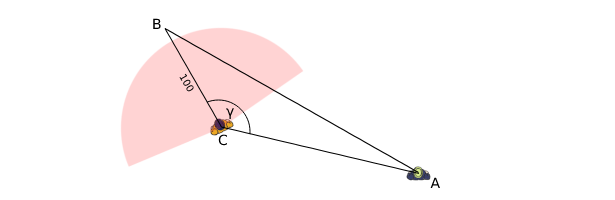
<style>
.page{position:relative;width:615px;height:200px;background:#ffffff}
.page>*{position:absolute;margin:0}
.t1{font:14px "DejaVuSans";color:#000000}
.t2{font:10px "DejaVuSans"}
</style>
<div class="page">
<p class="t1" style="left:153px;top:18px;width:8px;height:11px">B</p>
<p class="t2" style="left:179px;top:73px;width:15px;height:19px;rotate:60deg">100</p>
<p class="t1" style="left:226px;top:108px;width:8px;height:11px">γ</p>
<p class="t1" style="left:218px;top:134px;width:10px;height:12px">C</p>
<p class="t1" style="left:430px;top:177px;width:10px;height:11px">A</p>
</div>
